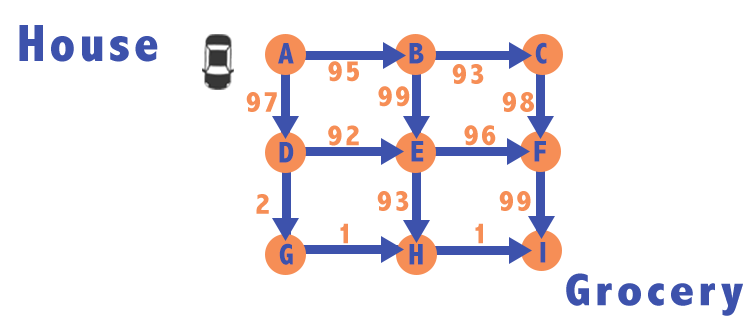
<style>
.page{position:relative;width:747px;height:316px;background:#ffffff}
.page>*{position:absolute;margin:0}
.t1{font:52.8px "AbadiMT-CondensedExtraBold";letter-spacing:0.075em;color:#3d52ac}
.t2{font:30px "AbadiMT-CondensedExtraBold";letter-spacing:0.075em;color:#3d52ac}
.t3{font:30px "AbadiMT-CondensedExtraBold";letter-spacing:0.075em;color:#f68e56}
.t4{font:46px "AbadiMT-CondensedExtraBold";letter-spacing:0.075em;color:#3d52ac;scale:1.15 1}
</style>
<div class="page">
<p class="t1" style="left:19px;top:25px;width:139px;height:37px">House</p>
<p class="t2" style="left:278px;top:43px;width:16px;height:21px">A</p>
<p class="t2" style="left:409px;top:43px;width:15px;height:21px">B</p>
<p class="t2" style="left:535px;top:42px;width:12px;height:22px">C</p>
<p class="t3" style="left:328px;top:61px;width:31px;height:21px">95</p>
<p class="t3" style="left:452px;top:64px;width:32px;height:20px">93</p>
<p class="t3" style="left:378px;top:86px;width:32px;height:21px">99</p>
<p class="t3" style="left:246px;top:92px;width:31px;height:20px">97</p>
<p class="t3" style="left:502px;top:92px;width:32px;height:20px">98</p>
<p class="t3" style="left:328px;top:125px;width:31px;height:21px">92</p>
<p class="t3" style="left:464px;top:125px;width:32px;height:21px">96</p>
<p class="t2" style="left:279px;top:142px;width:15px;height:21px">D</p>
<p class="t2" style="left:411px;top:141px;width:13px;height:21px">E</p>
<p class="t2" style="left:534px;top:141px;width:12px;height:21px">F</p>
<p class="t3" style="left:256px;top:194px;width:13px;height:20px">2</p>
<p class="t3" style="left:377px;top:191px;width:32px;height:20px">93</p>
<p class="t3" style="left:499px;top:191px;width:32px;height:20px">99</p>
<p class="t3" style="left:340px;top:223px;width:8px;height:21px">1</p>
<p class="t3" style="left:475px;top:223px;width:8px;height:21px">1</p>
<p class="t2" style="left:279px;top:243px;width:14px;height:22px">G</p>
<p class="t2" style="left:409px;top:244px;width:14px;height:21px">H</p>
<p class="t2" style="left:540px;top:242px;width:6px;height:21px">I</p>
<p class="t4" style="left:566px;top:273px;width:177px;height:43px">Grocery</p>
</div>
